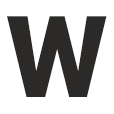
<style>
.page{position:relative;width:114px;height:114px;background:#ffffff}
.page>*{position:absolute;margin:0}
.t1{font:112px "Industry-Black";color:#2b2a28;text-transform:uppercase}
</style>
<div class="page">
<p class="t1" style="left:7px;top:16px;width:100px;height:81px">W</p>
</div>
